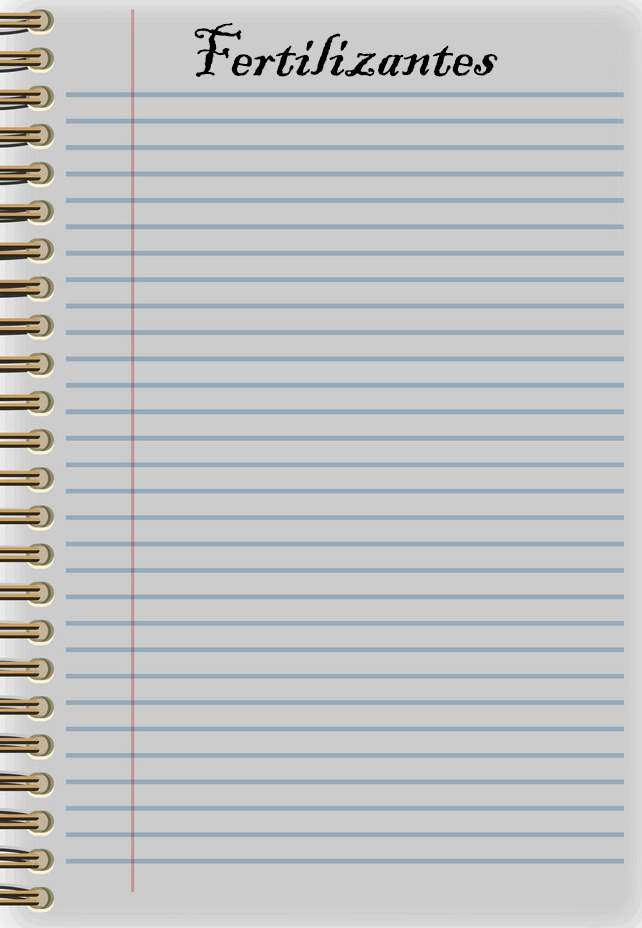
<style>
.page{position:relative;width:642px;height:928px;background:#cccccc}
.page>*{position:absolute;margin:0}
.t1{font:72px "BlackadderITC-Regular";color:#000000}
</style>
<div class="page">
<p class="t1" style="left:194px;top:23px;width:304px;height:54px">Fertilizantes</p>
</div>
